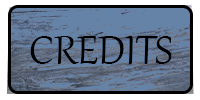
<style>
.page{position:relative;width:200px;height:100px;background:#6582a7}
.page>*{position:absolute;margin:0}
.t1{font:50px "Gabriola";color:#000000}
</style>
<div class="page">
<p class="t1" style="left:30px;top:36px;width:142px;height:28px">CREDITS</p>
</div>
